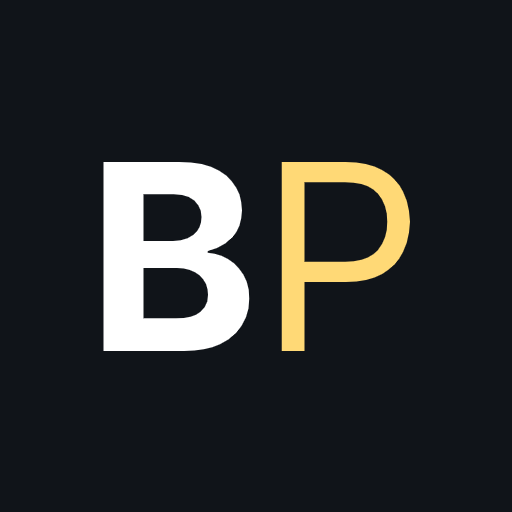
<style>
.page{position:relative;width:512px;height:512px;background:#101419}
.page>*{position:absolute;margin:0}
.t1{font:260px "Inter-Bold";color:#ffffff}
.t2{font:260px "Inter-Regular";color:#ffd976}
</style>
<div class="page">
<p class="t1" style="left:103px;top:161px;width:307px;height:190px">B<span class="t2">P</span></p>
</div>
